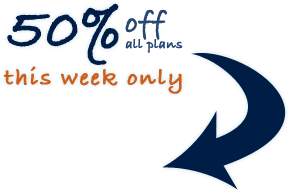
<style>
.page{position:relative;width:290px;height:193px;background:#ffffff}
.page>*{position:absolute;margin:0}
.t1{font:60px "BradleyHandITCTTBold";color:#001e45;font-weight:bold}
.t2{font:14px "BradleyHandITCTTBold";color:#254772;font-weight:bold}
.t3{font:30px "BradleyHandITCTTBold";color:#254772;font-weight:bold}
.t4{font:24px "BradleyHandITCTTBold";letter-spacing:0.06em;color:#cf5e18;font-weight:bold}
</style>
<div class="page">
<p class="t1" style="left:7px;top:3px;width:112px;height:62px">50%</p>
<p class="t2" style="left:125px;top:9px;width:58px;height:44px"><span class="t3">off<br></span>all plans</p>
<p class="t4" style="left:3px;top:66px;width:179px;height:28px">this week only</p>
</div>
